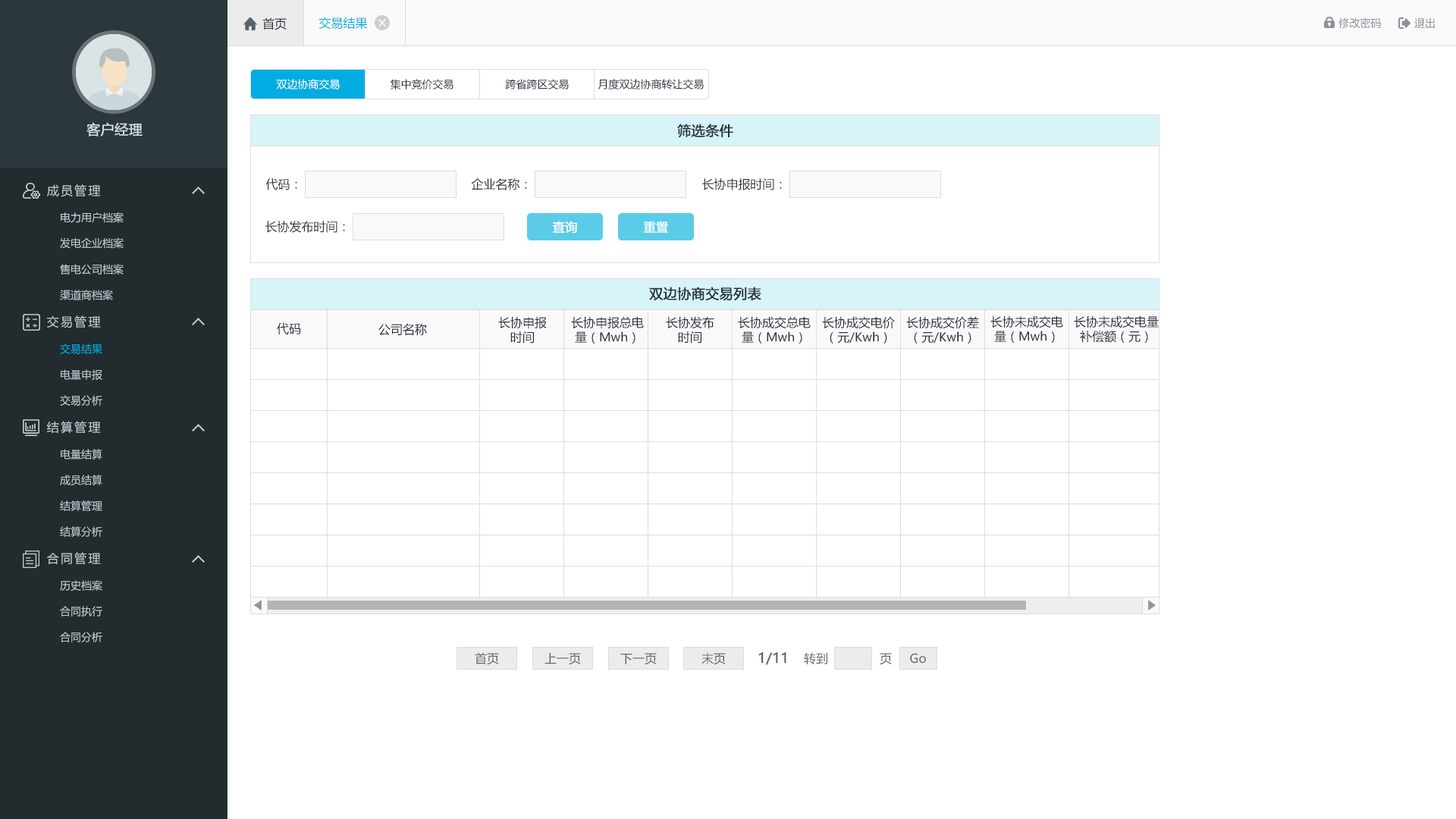
<style>
.page{position:relative;width:1456px;height:819px;background:#ffffff}
.page>*{position:absolute;margin:0}
.t1{font:12.1px "MicrosoftYaHei";color:#242e3b}
.t2{font:12.1px "MicrosoftYaHei";color:#00ace2}
.t3{font:10.6px "MicrosoftYaHei";color:#8a8f99}
.t4{font:10.6px "MicrosoftYaHei";color:#ffffff}
.t5{font:10.6px "MicrosoftYaHei";color:#242e3b}
.t6{font:13.6px "MicrosoftYaHei";color:#d1dce2;font-weight:bold}
.t7{font:13.6px "MicrosoftYaHei";color:#242e3b;font-weight:bold}
.t8{font:12.1px "MicrosoftYaHei";letter-spacing:0.14em;color:#c2cdd2}
.t9{font:12.1px "MicrosoftYaHei";color:#333333}
.t10{font:10.6px "MicrosoftYaHei";color:#c2cdd2}
.t11{font:12.1px "MicrosoftYaHei";color:#ffffff;font-weight:bold}
.t12{font:10.6px "MicrosoftYaHei";color:#00ace2}
.t13{font:12.1px "MicrosoftYaHei";color:#61656b}
.t14{font:13.6px "MicrosoftYaHei";color:#61656b;font-weight:bold}
</style>
<div class="page">
<p class="t1" style="left:262px;top:17px;width:25px;height:13px">首页</p>
<p class="t2" style="left:318px;top:17px;width:50px;height:13px">交易结果</p>
<p class="t3" style="left:1338px;top:17px;width:43px;height:12px">修改密码</p>
<p class="t3" style="left:1414px;top:17px;width:21px;height:11px">退出</p>
<p class="t4" style="left:276px;top:79px;width:64px;height:10px">双边协商交易</p>
<p class="t5" style="left:390px;top:79px;width:63px;height:10px">集中竞价交易</p>
<p class="t5" style="left:505px;top:79px;width:64px;height:10px">跨省跨区交易</p>
<p class="t5" style="left:598px;top:79px;width:106px;height:10px">月度双边协商转让交易</p>
<p class="t6" style="left:86px;top:122px;width:57px;height:14px">客户经理</p>
<p class="t7" style="left:677px;top:124px;width:56px;height:14px">筛选条件</p>
<p class="t8" style="left:47px;top:184px;width:54px;height:13px">成员管理</p>
<p class="t9" style="left:265px;top:178px;width:32px;height:12px">代码：</p>
<p class="t9" style="left:471px;top:178px;width:56px;height:12px">企业名称：</p>
<p class="t9" style="left:702px;top:178px;width:80px;height:12px">长协申报时间：</p>
<p class="t10" style="left:61px;top:212px;width:63px;height:11px">电力用户档案</p>
<p class="t9" style="left:265px;top:221px;width:80px;height:12px">长协发布时间：</p>
<p class="t11" style="left:552px;top:221px;width:25px;height:12px">查询</p>
<p class="t11" style="left:643px;top:221px;width:26px;height:12px">重置</p>
<p class="t10" style="left:60px;top:237px;width:64px;height:12px">发电企业档案</p>
<p class="t10" style="left:60px;top:264px;width:64px;height:11px">售电公司档案</p>
<p class="t10" style="left:60px;top:290px;width:53px;height:10px">渠道商档案</p>
<p class="t7" style="left:649px;top:287px;width:112px;height:14px">双边协商交易列表</p>
<p class="t8" style="left:47px;top:315px;width:54px;height:13px">交易管理</p>
<p class="t1" style="left:498px;top:316px;width:49px;height:28px;text-align:center">长协申报<br>时间</p>
<p class="t1" style="left:571px;top:316px;width:73px;height:28px;text-align:center">长协申报总电<br>量（Mwh）</p>
<p class="t1" style="left:666px;top:316px;width:48px;height:28px;text-align:center">长协发布<br>时间</p>
<p class="t1" style="left:738px;top:316px;width:73px;height:28px;text-align:center">长协成交总电<br>量（Mwh）</p>
<p class="t1" style="left:822px;top:316px;width:73px;height:28px;text-align:center">长协成交电价<br>（元/Kwh）</p>
<p class="t1" style="left:906px;top:316px;width:73px;height:28px;text-align:center">长协成交价差<br>（元/Kwh）</p>
<p class="t1" style="left:990px;top:315px;width:73px;height:28px;text-align:center">长协未成交电<br>量（Mwh）</p>
<p class="t1" style="left:1074px;top:315px;width:85px;height:28px;text-align:center">长协未成交电量<br>补偿额（元）</p>
<p class="t1" style="left:277px;top:322px;width:24px;height:12px">代码</p>
<p class="t1" style="left:378px;top:323px;width:49px;height:13px">公司名称</p>
<p class="t12" style="left:60px;top:344px;width:42px;height:10px">交易结果</p>
<p class="t10" style="left:61px;top:369px;width:41px;height:11px">电量申报</p>
<p class="t10" style="left:60px;top:395px;width:42px;height:11px">交易分析</p>
<p class="t8" style="left:47px;top:421px;width:54px;height:13px">结算管理</p>
<p class="t10" style="left:61px;top:449px;width:41px;height:11px">电量结算</p>
<p class="t10" style="left:60px;top:475px;width:42px;height:10px">成员结算</p>
<p class="t10" style="left:60px;top:500px;width:42px;height:11px">结算管理</p>
<p class="t10" style="left:60px;top:526px;width:42px;height:11px">结算分析</p>
<p class="t8" style="left:47px;top:552px;width:54px;height:12px">合同管理</p>
<p class="t10" style="left:60px;top:580px;width:42px;height:11px">历史档案</p>
<p class="t10" style="left:60px;top:606px;width:42px;height:11px">合同执行</p>
<p class="t10" style="left:60px;top:632px;width:42px;height:10px">合同分析</p>
<p class="t13" style="left:475px;top:652px;width:24px;height:13px">首页</p>
<p class="t13" style="left:544px;top:653px;width:37px;height:12px">上一页</p>
<p class="t13" style="left:620px;top:653px;width:37px;height:12px">下一页</p>
<p class="t13" style="left:701px;top:652px;width:25px;height:13px">末页</p>
<p class="t14" style="left:758px;top:652px;width:28px;height:13px">1/11</p>
<p class="t13" style="left:804px;top:652px;width:23px;height:12px">转到</p>
<p class="t13" style="left:880px;top:653px;width:12px;height:12px">页</p>
<p class="t13" style="left:910px;top:653px;width:16px;height:11px">Go</p>
</div>
